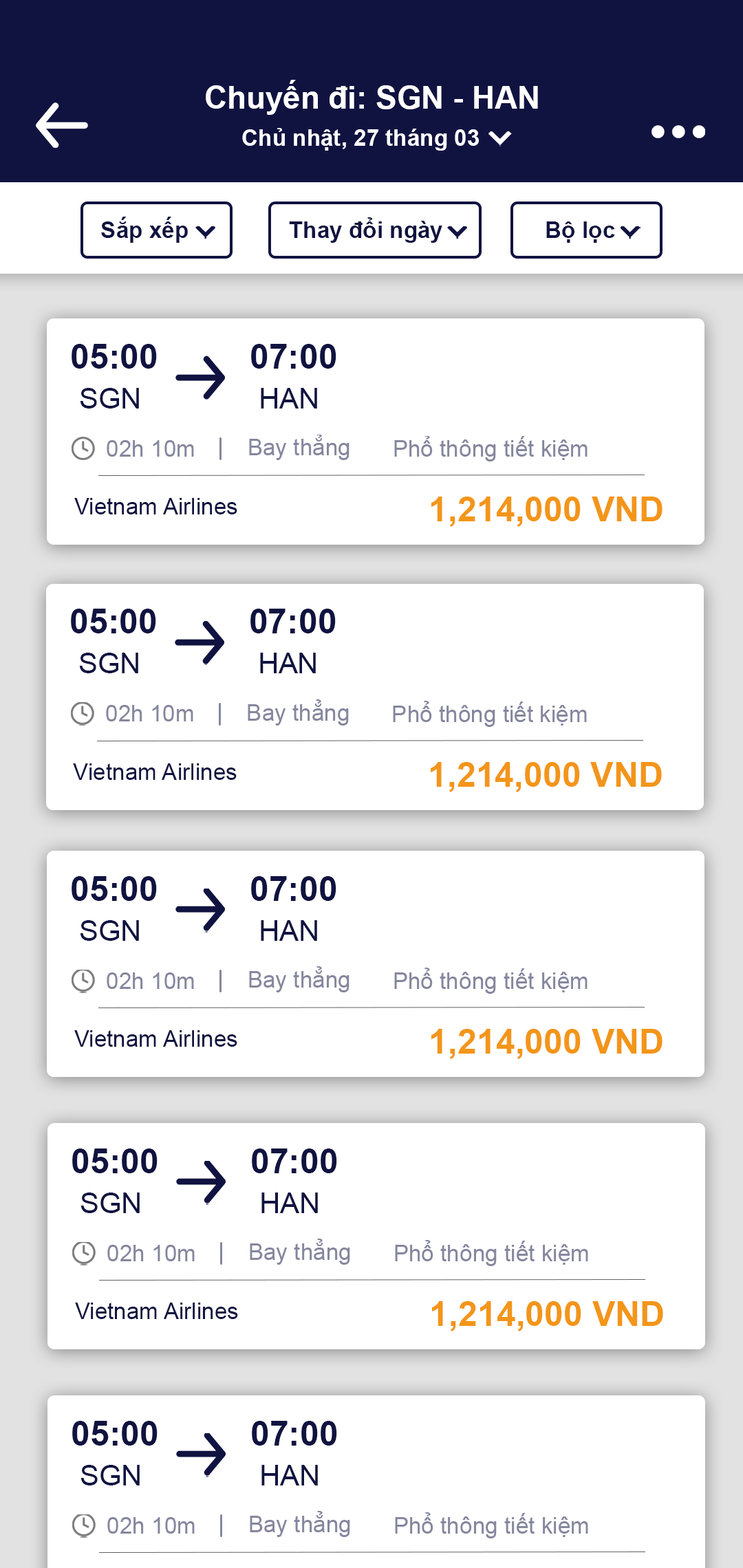
<style>
.page{position:relative;width:743px;height:1568px;background:#ffffff}
.page>*{position:absolute;margin:0}
.t1{font:31.5px "Arial-BoldMT";color:#ffffff}
.t2{font:22.9px "Arial-BoldMT";color:#ffffff}
.t3{font:28.7px "Arial-BoldMT";color:#101340}
.t4{font:22.9px "Arial-BoldMT";color:#101340}
.t5{font:34.4px "Arial-BoldMT";color:#101340}
.t6{font:28.7px "ArialMT";color:#101340}
.t7{font:22.9px "ArialMT";color:#85879e}
.t8{font:22.9px "ArialMT";color:#101340}
.t9{font:34.4px "Arial-BoldMT";color:#f39519}
</style>
<div class="page">
<p class="t1" style="left:206px;top:80px;width:332px;height:35px">Chuyến đi: SGN - HAN</p>
<p class="t2" style="left:242px;top:125px;width:370px;height:26px">Chủ nhật, 27 tháng 03<span class="t3">em Ipsum</span></p>
<p class="t4" style="left:101px;top:217px;width:87px;height:26px">Sắp xếp</p>
<p class="t4" style="left:289px;top:217px;width:153px;height:26px">Thay đổi ngày</p>
<p class="t4" style="left:546px;top:221px;width:69px;height:22px">Bộ lọc</p>
<p class="t5" style="left:72px;top:344px;width:85px;height:25px">05:00</p>
<p class="t5" style="left:251px;top:344px;width:85px;height:25px">07:00</p>
<p class="t6" style="left:80px;top:388px;width:59px;height:21px">SGN</p>
<p class="t6" style="left:261px;top:388px;width:56px;height:21px">HAN</p>
<p class="t7" style="left:249px;top:435px;width:100px;height:25px">Bay thẳng</p>
<p class="t7" style="left:394px;top:436px;width:193px;height:25px">Phổ thông tiết kiệm</p>
<p class="t7" style="left:107px;top:440px;width:87px;height:17px">02h 10m</p>
<p class="t8" style="left:74px;top:498px;width:163px;height:16px">Vietnam Airlines</p>
<p class="t9" style="left:431px;top:497px;width:231px;height:30px">1,214,000 VND</p>
<p class="t5" style="left:71px;top:609px;width:85px;height:24px">05:00</p>
<p class="t5" style="left:250px;top:609px;width:86px;height:24px">07:00</p>
<p class="t6" style="left:79px;top:653px;width:59px;height:20px">SGN</p>
<p class="t6" style="left:260px;top:653px;width:56px;height:20px">HAN</p>
<p class="t7" style="left:248px;top:699px;width:101px;height:27px">Bay thẳng</p>
<p class="t7" style="left:393px;top:701px;width:194px;height:26px">Phổ thông tiết kiệm</p>
<p class="t7" style="left:106px;top:705px;width:87px;height:16px">02h 10m</p>
<p class="t9" style="left:431px;top:762px;width:231px;height:30px">1,214,000 VND</p>
<p class="t8" style="left:73px;top:763px;width:164px;height:17px">Vietnam Airlines</p>
<p class="t5" style="left:72px;top:876px;width:85px;height:25px">05:00</p>
<p class="t5" style="left:251px;top:876px;width:85px;height:25px">07:00</p>
<p class="t6" style="left:80px;top:920px;width:59px;height:21px">SGN</p>
<p class="t6" style="left:261px;top:920px;width:56px;height:21px">HAN</p>
<p class="t7" style="left:107px;top:972px;width:87px;height:17px">02h 10m</p>
<p class="t7" style="left:249px;top:966px;width:100px;height:26px">Bay thẳng</p>
<p class="t7" style="left:394px;top:968px;width:193px;height:26px">Phổ thông tiết kiệm</p>
<p class="t8" style="left:74px;top:1030px;width:163px;height:17px">Vietnam Airlines</p>
<p class="t9" style="left:431px;top:1029px;width:231px;height:30px">1,214,000 VND</p>
<p class="t5" style="left:72px;top:1148px;width:85px;height:25px">05:00</p>
<p class="t5" style="left:252px;top:1148px;width:85px;height:25px">07:00</p>
<p class="t6" style="left:80px;top:1193px;width:60px;height:20px">SGN</p>
<p class="t6" style="left:261px;top:1193px;width:57px;height:20px">HAN</p>
<p class="t7" style="left:250px;top:1239px;width:100px;height:26px">Bay thẳng</p>
<p class="t7" style="left:395px;top:1240px;width:193px;height:26px">Phổ thông tiết kiệm</p>
<p class="t7" style="left:107px;top:1245px;width:88px;height:16px">02h 10m</p>
<p class="t9" style="left:432px;top:1301px;width:231px;height:30px">1,214,000 VND</p>
<p class="t8" style="left:75px;top:1303px;width:163px;height:16px">Vietnam Airlines</p>
<p class="t5" style="left:72px;top:1421px;width:85px;height:25px">05:00</p>
<p class="t5" style="left:252px;top:1421px;width:85px;height:25px">07:00</p>
<p class="t6" style="left:80px;top:1465px;width:60px;height:20px">SGN</p>
<p class="t6" style="left:261px;top:1465px;width:57px;height:20px">HAN</p>
<p class="t7" style="left:107px;top:1517px;width:88px;height:17px">02h 10m</p>
<p class="t7" style="left:250px;top:1511px;width:100px;height:26px">Bay thẳng</p>
<p class="t7" style="left:395px;top:1512px;width:193px;height:26px">Phổ thông tiết kiệm</p>
</div>
